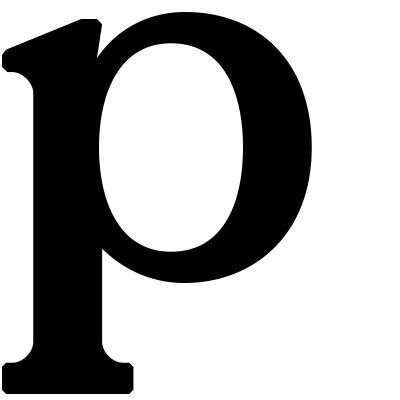
<style>
.page{position:relative;width:400px;height:400px;background:#ffffff}
.page>*{position:absolute;margin:0}
.t1{font:521px "ValueSerif";letter-spacing:1.04em;color:#000000}
</style>
<div class="page">
<p class="t1" style="left:2px;top:12px;width:310px;height:382px">p</p>
</div>
